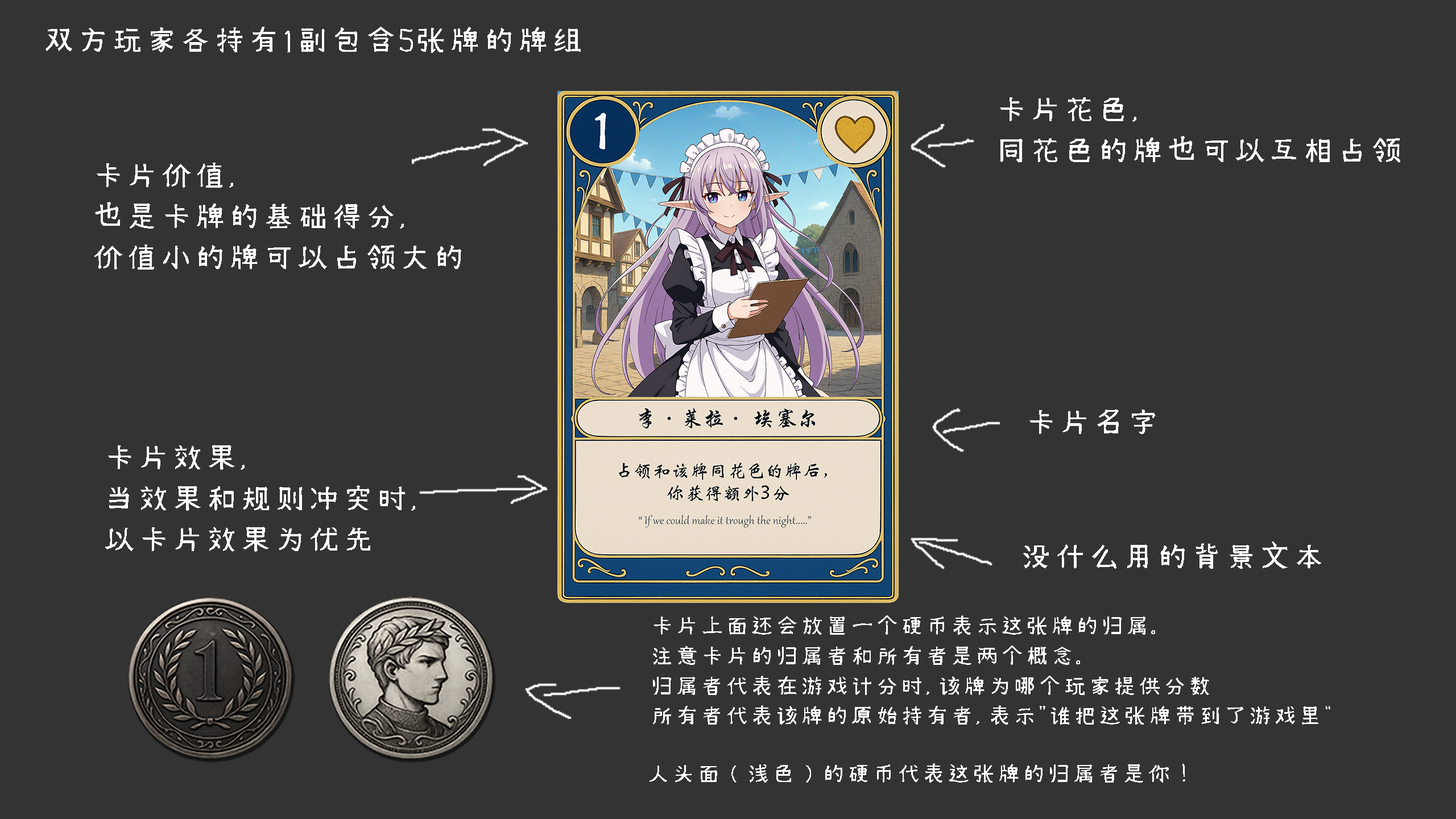
<style>
.page{position:relative;width:1456px;height:819px;background:#333333}
.page>*{position:absolute;margin:0}
.t1{font:34.1px "Xim-Sans-Brahmic";color:#ffffff}
.t2{font:25px "Xim-Sans-Brahmic";color:#ffffff}
</style>
<div class="page">
<p class="t1" style="left:45px;top:27px;width:536px;height:26px">双方玩家各持有1副包含5张牌的牌组</p>
<p class="t1" style="left:1000px;top:97px;width:400px;height:66px">卡片花色，<br>同花色的牌也可以互相占领</p>
<p class="t1" style="left:94px;top:163px;width:367px;height:107px">卡片价值，<br>也是卡牌的基础得分，<br>价值小的牌可以占领大的</p>
<p class="t1" style="left:1029px;top:409px;width:126px;height:25px">卡片名字</p>
<p class="t1" style="left:105px;top:445px;width:310px;height:107px">卡片效果，<br>当效果和规则冲突时，<br>以卡片效果为优先</p>
<p class="t1" style="left:1023px;top:541px;width:298px;height:28px">没什么用的背景文本</p>
<p class="t2" style="left:653px;top:615px;width:677px;height:110px">卡片上面还会放置一个硬币表示这张牌的归属。<br>注意卡片的归属者和所有者是两个概念。<br>归属者代表在游戏计分时，该牌为哪个玩家提供分数<br>所有者代表该牌的原始持有者，表示”谁把这张牌带到了游戏里“</p>
<p class="t2" style="left:650px;top:763px;width:535px;height:20px">人头面（浅色）的硬币代表这张牌的归属者是你！</p>
</div>
